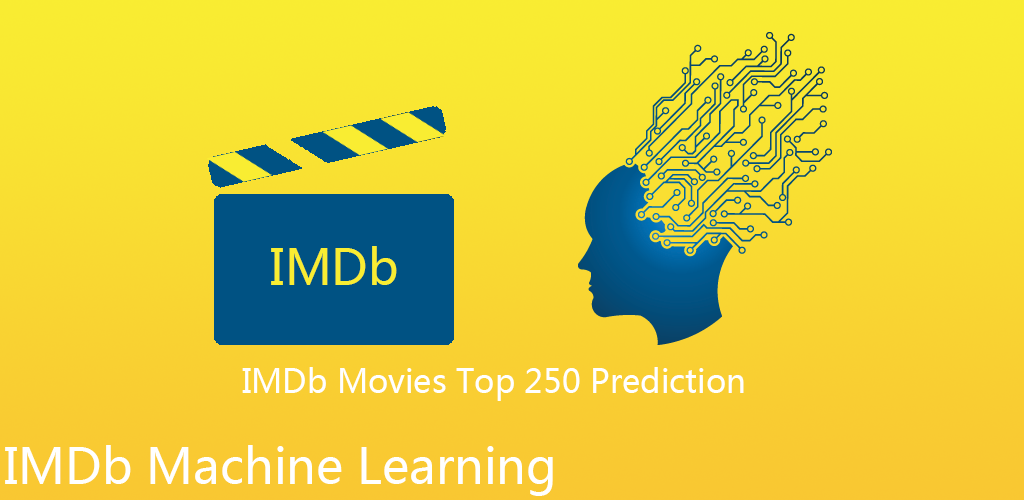
<style>
.page{position:relative;width:1024px;height:500px}
.page>*{position:absolute;margin:0}
.t1{font:48px "MicrosoftYaHei";color:#f9ed32}
.t2{font:32px "MicrosoftYaHei";color:#ffffff}
.t3{font:48px "MicrosoftYaHei";color:#ffffff}
</style>
<div class="page">
<p class="t1" style="left:271px;top:246px;width:126px;height:39px">IMDb</p>
<p class="t2" style="left:242px;top:367px;width:502px;height:34px">IMDb Movies Top 250 Prediction</p>
<p class="t3" style="left:5px;top:445px;width:548px;height:51px">IMDb Machine Learning</p>
</div>
